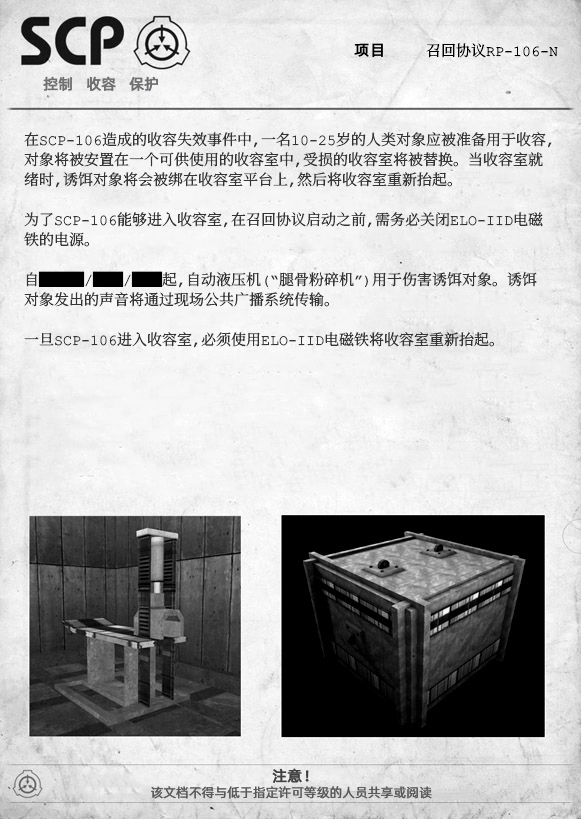
<style>
.page{position:relative;width:581px;height:819px}
.page>*{position:absolute;margin:0}
.t1{font:15px "ContainmentBreach-Regular";color:#000000}
.t2{font:15px "AlibabaPuHuiTiR";color:#000000;font-weight:bold}
.t3{font:15px "AlibabaPuHuiTiR";color:#707070;font-weight:bold}
.t4{font:15px/20px "ContainmentBreach-Regular";color:#353535}
.t5{font:15px/20px "ContainmentBreach-Regular";color:#000000}
.t6{font:15px "AlibabaPuHuiTiR";color:#414141;font-weight:bold}
.t7{font:13px "AlibabaPuHuiTiR";color:#575757}
</style>
<div class="page">
<p class="t1" style="left:354px;top:43px;width:204px;height:15px"><span class="t2">项目  </span>召回协议RP-106-N</p>
<p class="t3" style="left:43px;top:76px;width:115px;height:15px">控制   收容   保护</p>
<p class="t4" style="left:24px;top:132px;width:528px;height:216px">在SCP-106造成的收容失效事件中，一名10-25岁的人类对象应被准备用于收容，<br>对象将被安置在一个可供使用的收容室中，受损的收容室将被替换。当收容室就<br>绪时，诱饵对象将会被绑在收容室平台上，然后将收容室重新抬起。<br><br>为了SCP-106能够进入收容室，在召回协议启动之前，需务必关闭ELO-IID电磁<br>铁的电源。<br><br>自<span class="t5">███</span>/<span class="t5">██</span>/<span class="t5">██</span>起，自动液压机（“腿骨粉碎机”）用于伤害诱饵对象。诱饵<br>对象发出的声音将通过现场公共广播系统传输。<br><br>一旦SCP-106进入收容室，必须使用ELO-IID电磁铁将收容室重新抬起。</p>
<p class="t6" style="left:272px;top:768px;width:37px;height:15px">注意！</p>
<p class="t7" style="left:151px;top:786px;width:281px;height:13px">该文档不得与低于指定许可等级的人员共享或阅读</p>
</div>
